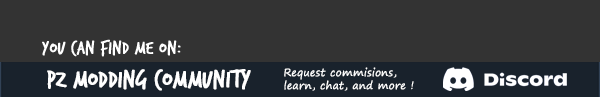
<style>
.page{position:relative;width:600px;height:97px;background:#333333}
.page>*{position:absolute;margin:0}
.t1{font:19.6px "TrashHand";color:#ffffff;font-weight:bold}
.t2{font:26px "TrashHand";color:#ffffff;font-weight:bold}
.t3{font:10.5px "SegoePrint";color:#ffffff;font-weight:bold}
</style>
<div class="page">
<p class="t1" style="left:42px;top:39px;width:139px;height:18px">You can find me on:</p>
<p class="t2" style="left:47px;top:69px;width:204px;height:22px">PZ Modding COmmunity</p>
<p class="t3" style="left:284px;top:67px;width:130px;height:24px">Request commisions, <br>learn, chat, and more !</p>
</div>
